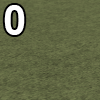
<style>
.page{position:relative;width:100px;height:100px}
.page>*{position:absolute;margin:0}
.t1{font:41.7px "Arial-BoldMT";color:#ffffff}
</style>
<div class="page">
<p class="t1" style="left:4px;top:5px;width:21px;height:30px">0</p>
</div>
